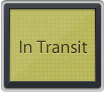
<style>
.page{position:relative;width:106px;height:95px}
.page>*{position:absolute;margin:0}
.t1{font:18px "MyriadPro-Regular";color:#3e3e25}
</style>
<div class="page">
<p class="t1" style="left:20px;top:40px;width:67px;height:14px">In Transit</p>
</div>
